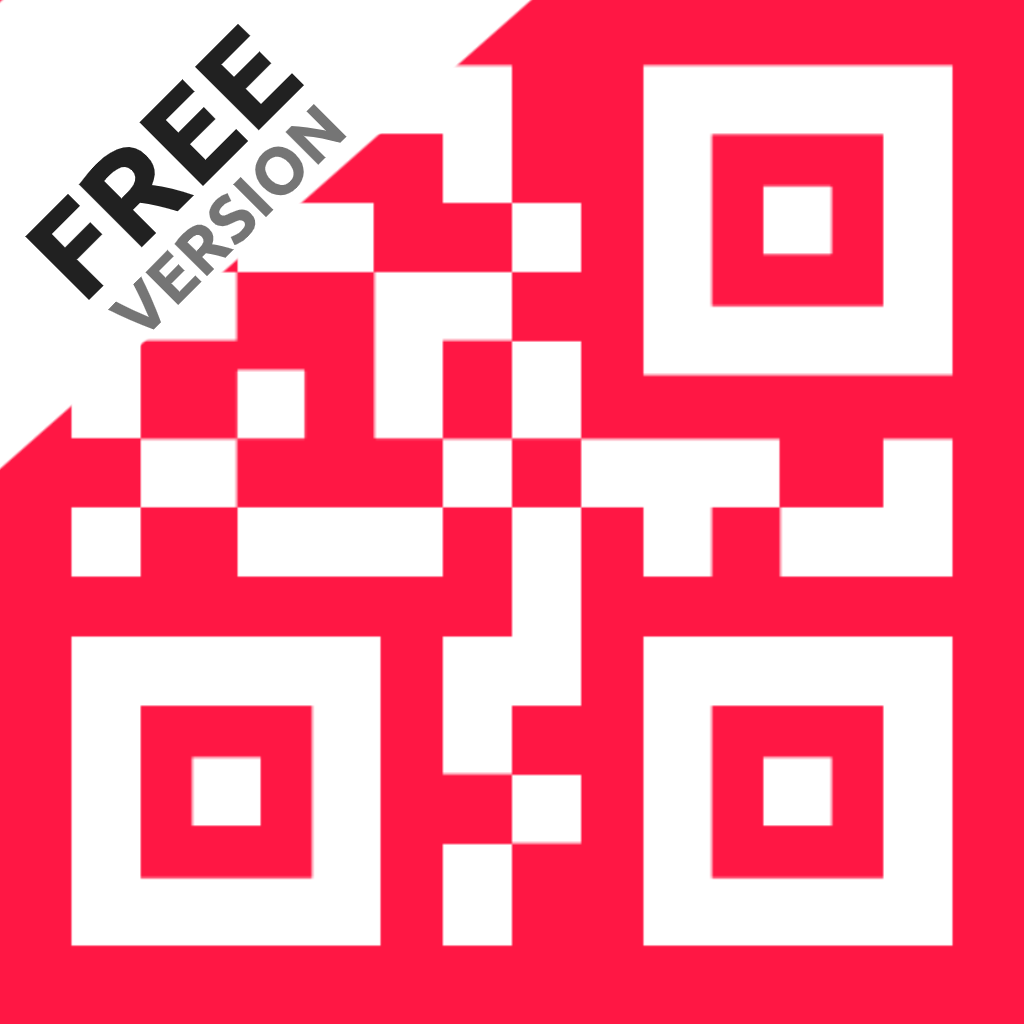
<style>
.page{position:relative;width:1024px;height:1024px;background:#ff1744}
.page>*{position:absolute;margin:0}
.t1{font:130px "Ubuntu-Bold";color:#212121}
.t2{font:66.9px "Ubuntu-Bold";color:#757575}
</style>
<div class="page">
<p class="t1" style="left:25px;top:23px;width:279px;height:278px;rotate:-45deg">FREE</p>
<p class="t2" style="left:108px;top:104px;width:239px;height:226px;rotate:-45deg">VERSION</p>
</div>
